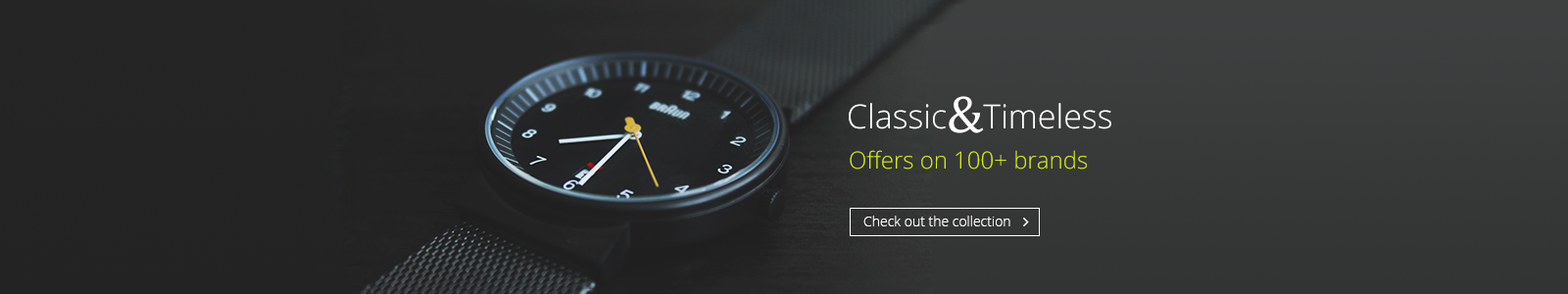
<style>
.page{position:relative;width:1568px;height:294px}
.page>*{position:absolute;margin:0}
.t1{font:33.3px "OpenSans-Light";color:#ffffff}
.t2{font:52.9px "CambriaMath";color:#ffffff}
.t3{font:23.5px "OpenSans-Light";color:#d7ee10}
.t4{font:13.7px "OpenSans-Light";color:#ffffff}
</style>
<div class="page">
<p class="t1" style="left:849px;top:96px;width:262px;height:37px">Classic<span class="t2">&amp;</span>Timeless</p>
<p class="t3" style="left:850px;top:150px;width:237px;height:20px">Offers on 100+ brands</p>
<p class="t4" style="left:863px;top:216px;width:147px;height:10px">Check out the collection</p>
</div>
